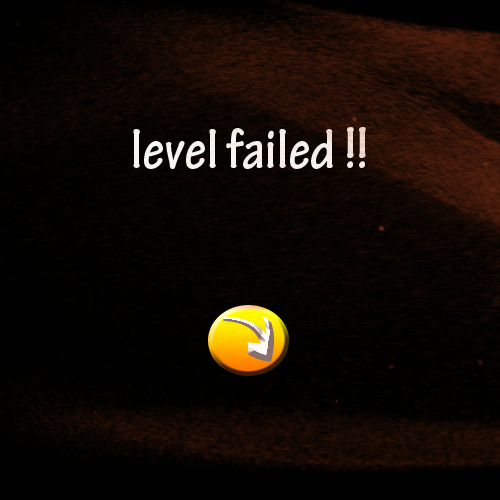
<style>
.page{position:relative;width:500px;height:500px;background:#000100}
.page>*{position:absolute;margin:0}
.t1{font:60px "TektonPro-BoldCond";color:#f9fcf9}
</style>
<div class="page">
<p class="t1" style="left:133px;top:127px;width:233px;height:42px">level failed !!</p>
</div>
